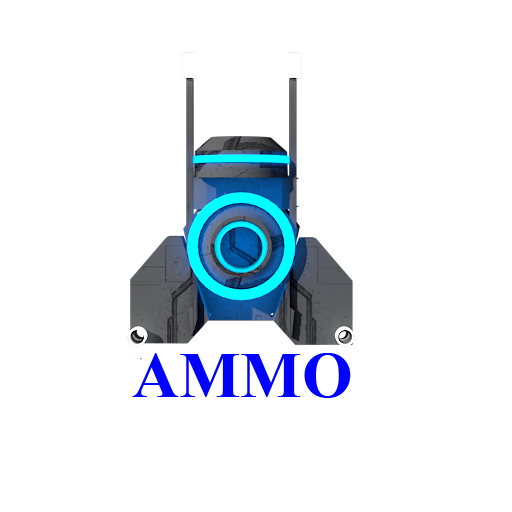
<style>
.page{position:relative;width:512px;height:512px;background:#ffffff}
.page>*{position:absolute;margin:0}
.t1{font:65px "TimesNewRomanPS-BoldMT";color:#0000ff}
</style>
<div class="page">
<p class="t1" style="left:132px;top:353px;width:219px;height:45px">AMMO</p>
</div>
